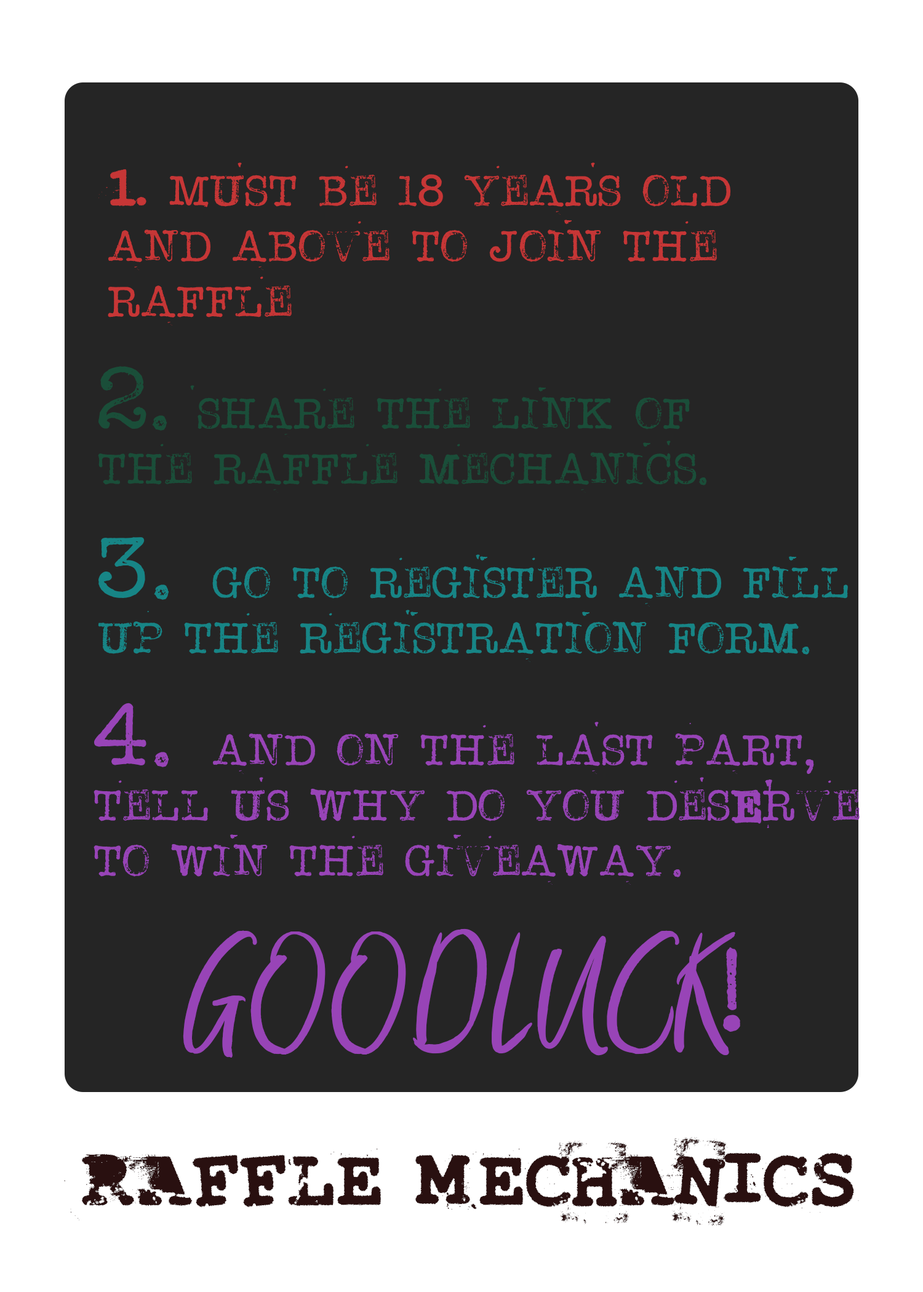
<style>
.page{position:relative;width:923px;height:1292px;background:#252525}
.page>*{position:absolute;margin:0}
.t1{font:46.1px "STAMPWRITER-KIT";color:#c63636}
.t2{font:92.3px "LastDraft";color:#c63636}
.t3{font:46.1px "STAMPWRITER-KIT";color:#1a4e39}
.t4{font:92.3px "STAMPWRITER-KIT";color:#1a4e39}
.t5{font:46.1px "STAMPWRITER-KIT";color:#178586}
.t6{font:92.3px "STAMPWRITER-KIT";color:#178586}
.t7{font:46.1px "STAMPWRITER-KIT";color:#9844b7}
.t8{font:92.3px "STAMPWRITER-KIT";color:#9844b7}
.t9{font:123.1px "Something-in-the-Night";color:#9844b7}
.t10{font:123.1px "STAMPWRITER-KIT";color:#9844b7}
.t11{font:134.4px "LastDraft";color:#291010}
</style>
<div class="page">
<p class="t1" style="left:98px;top:162px;width:632px;height:163px"><span class="t2">1. </span>Must be 18 years old<br>and above to join the <br>raffle</p>
<p class="t3" style="left:98px;top:366px;width:609px;height:127px"><span class="t4">2. </span>share the link of  <br>the raffle mechanics.</p>
<p class="t5" style="left:98px;top:537px;width:750px;height:125px"><span class="t6">3. </span>go to register and fill <br>up the registration form.</p>
<p class="t7" style="left:94px;top:703px;width:766px;height:182px"><span class="t8">4. </span>and on the last part,<br>tell us why do you desErve <br>to win the giveaway.</p>
<p class="t9" style="left:183px;top:928px;width:557px;height:130px">GOODLUCK<span class="t10">!</span></p>
<p class="t11" style="left:64px;top:1136px;width:795px;height:90px">RAFFLE MECHANICS</p>
</div>
